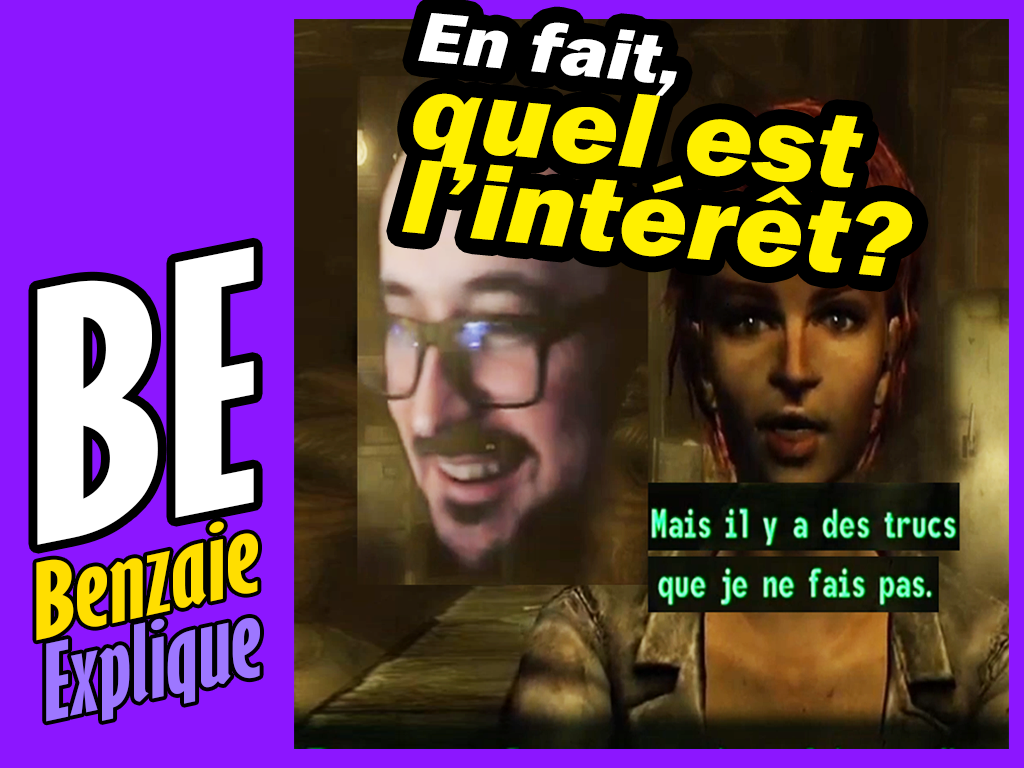
<style>
.page{position:relative;width:1024px;height:768px;background:#8c16ff}
.page>*{position:absolute;margin:0}
.t1{font:109.5px/54.7px "FranklinGothic-HeavyItalic";letter-spacing:0.01em;color:#fff000;scale:1.07 1}
.t2{font:73px/54.7px "FranklinGothic-HeavyItalic";letter-spacing:0.01em;color:#ffffff;scale:1.07 1}
.t3{font:320.9px "GillSansMT-ExtraCondensedBold";color:#ffffff;scale:1.36 1}
.t4{font:97.4px "GillSansMT-ExtraCondensedBold";color:#ffde00;scale:1.37 1}
.t5{font:97.4px "GillSansMT-ExtraCondensedBold";color:#9d77ff;scale:1.25 1}
</style>
<div class="page">
<p class="t1" style="left:402px;top:13px;width:511px;height:263px;rotate:5deg"><span class="t2">En fait,<br></span>quel est <br>l’intérêt?</p>
<p class="t3" style="left:37px;top:246px;width:217px;height:299px;rotate:-11deg">BE</p>
<p class="t4" style="left:36px;top:521px;width:222px;height:120px;rotate:-12deg">Benzaie</p>
<p class="t5" style="left:46px;top:618px;width:214px;height:104px;rotate:-12deg">Explique</p>
</div>
